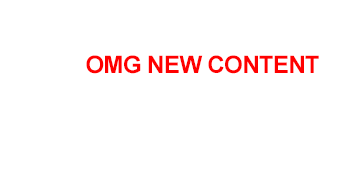
<style>
.page{position:relative;width:350px;height:179px;background:#ffffff}
.page>*{position:absolute;margin:0}
.t1{font:24px "Arial-BoldMT";letter-spacing:-0.025em;color:#ff0000}
</style>
<div class="page">
<p class="t1" style="left:86px;top:55px;width:233px;height:19px">OMG NEW CONTENT</p>
</div>
